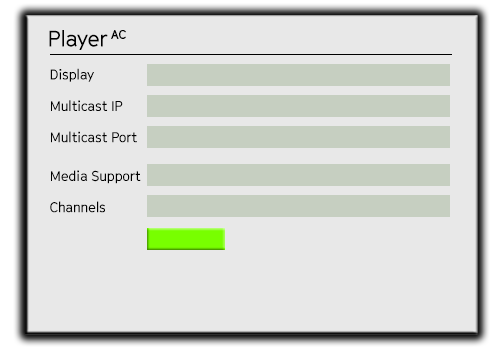
<style>
.page{position:relative;width:503px;height:350px;background:#e8e8e8}
.page>*{position:absolute;margin:0}
.t1{font:22px "CinetypeRegular";letter-spacing:-0.03em;color:#000000}
.t2{font:12.4px "CinetypeRegular";letter-spacing:-0.03em;color:#000000}
.t3{font:12.4px "CinetypeRegular";letter-spacing:-0.05em;color:#000000}
.t4{font:14px/31.3px "CinetypeRegular";letter-spacing:-0.03em;color:#000000}
.t5{font:14px/38.8px "CinetypeRegular";letter-spacing:-0.03em;color:#000000}
</style>
<div class="page">
<p class="t1" style="left:49px;top:30px;width:59px;height:20px">Player</p>
<p class="t2" style="left:111px;top:30px;width:15px;height:9px">A<span class="t3">C</span></p>
<p class="t4" style="left:50px;top:68px;width:91px;height:145px">Display<br>Multicast IP<br>Multicast Port<br><span class="t5">Media Support<br></span>Channels</p>
</div>
